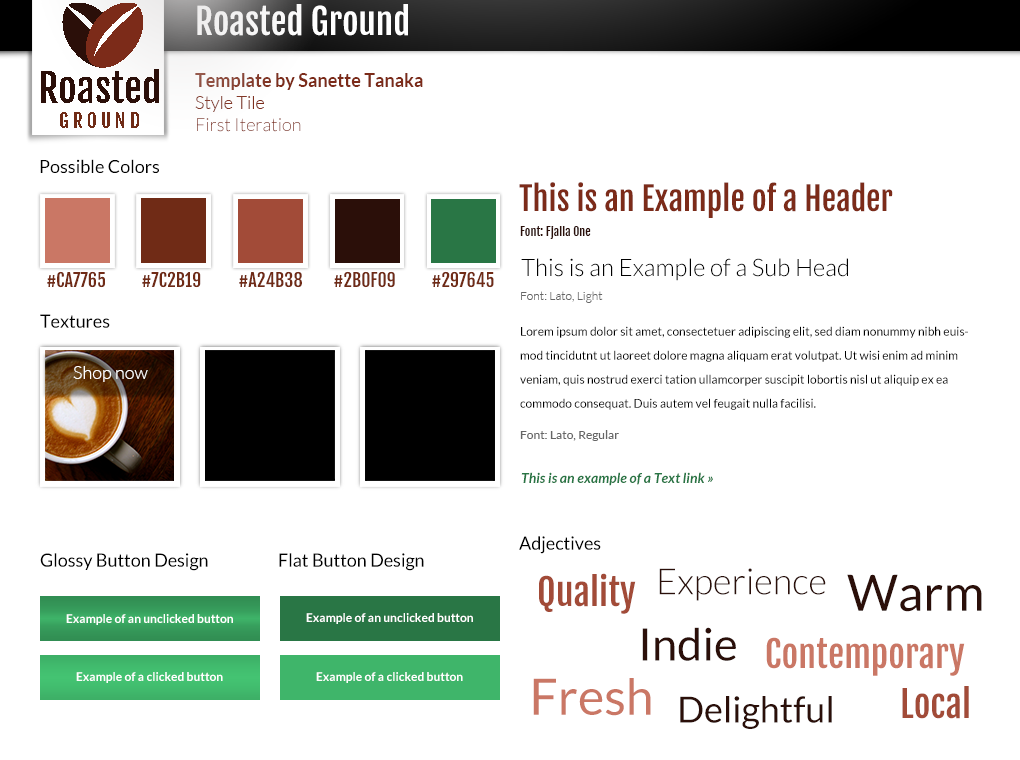
<style>
.page{position:relative;width:1020px;height:760px;background:#ffffff}
.page>*{position:absolute;margin:0}
.t1{font:35px "FjallaOne-Regular";color:#ffffff}
.t2{font:18px "Lato-Bold";color:#7c2b19}
.t3{font:18px "Lato-Light";color:#7c2b19}
.t4{font:18px "Lato-Light"}
.t5{font:18px "Lato-Regular";color:#000000}
.t6{font:32px "FjallaOne-Regular";color:#7c2b19}
.t7{font:12px "FjallaOne-Regular";color:#2b0f09}
.t8{font:24px "Lato-Light";color:#000000}
.t9{font:18px "FjallaOne-Regular";color:#702b16}
.t10{font:12px "Lato-Light";color:#666666}
.t11{font:18.3px "Lato-Regular";color:#000000}
.t12{font:12px/24px "Lato-Regular";color:#000000}
.t13{font:18px "Lato-Light";color:#ffffff}
.t14{font:12px "Lato-Regular";color:#666666}
.t15{font:14px "Lato-BoldItalic";color:#297645}
.t16{font:36px "Lato-Light";color:#2b0f09}
.t17{font:36px "FjallaOne-Regular";color:#a24b38}
.t18{font:50px "Lato-Regular";color:#2b0f09}
.t19{font:12px "Lato-Bold";color:#ffffff}
.t20{font:45px "Lato-Regular";color:#2b0f09}
.t21{font:36px "FjallaOne-Regular";color:#ca7765}
.t22{font:50px "Lato-Regular";color:#ca7765}
.t23{font:36px "Lato-Regular";color:#2b0f09}
</style>
<div class="page">
<p class="t1" style="left:197px;top:4px;width:211px;height:32px">Roasted Ground</p>
<p class="t2" style="left:195px;top:73px;width:228px;height:17px">Template by Sanette Tanaka</p>
<p class="t3" style="left:195px;top:96px;width:69px;height:16px">Style Tile</p>
<p class="t4" style="left:197px;top:118px;width:104px;height:14px">First Iteration</p>
<p class="t5" style="left:40px;top:159px;width:119px;height:14px">Possible Colors</p>
<p class="t6" style="left:519px;top:182px;width:374px;height:36px">This is an Example of a Header</p>
<p class="t7" style="left:520px;top:226px;width:71px;height:13px">Font: Fjalla One</p>
<p class="t8" style="left:521px;top:258px;width:327px;height:23px">This is an Example of a Sub Head</p>
<p class="t9" style="left:47px;top:271px;width:58px;height:17px">#CA7765</p>
<p class="t9" style="left:142px;top:271px;width:59px;height:17px">#7C2B19</p>
<p class="t9" style="left:239px;top:271px;width:63px;height:17px">#A24B38</p>
<p class="t9" style="left:334px;top:271px;width:61px;height:17px">#2B0F09</p>
<p class="t9" style="left:432px;top:271px;width:62px;height:17px">#297645</p>
<p class="t10" style="left:521px;top:291px;width:82px;height:12px">Font: Lato, Light</p>
<p class="t11" style="left:40px;top:314px;width:70px;height:14px">Textures</p>
<p class="t12" style="left:520px;top:326px;width:448px;height:84px">Lorem ipsum dolor sit amet, consectetuer adipiscing elit, sed diam nonummy nibh euismod tincidutnt ut laoreet dolore magna aliquam erat volutpat. Ut wisi enim ad minim veniam, quis nostrud exerci tation ullamcorper suscipit lobortis nisl ut aliquip ex ea commodo consequat. Duis autem vel feugait nulla facilisi.</p>
<p class="t13" style="left:73px;top:366px;width:75px;height:16px">Shop now</p>
<p class="t14" style="left:520px;top:430px;width:99px;height:11px">Font: Lato, Regular</p>
<p class="t15" style="left:521px;top:472px;width:192px;height:14px">This is an example of a Text link »</p>
<p class="t11" style="left:519px;top:536px;width:82px;height:18px">Adjectives</p>
<p class="t11" style="left:40px;top:553px;width:168px;height:18px">Glossy Button Design</p>
<p class="t11" style="left:279px;top:553px;width:145px;height:18px">Flat Button Design</p>
<p class="t16" style="left:659px;top:568px;width:167px;height:33px">Experience</p>
<p class="t17" style="left:539px;top:573px;width:97px;height:41px">Quality</p>
<p class="t18" style="left:847px;top:574px;width:135px;height:38px">Warm</p>
<p class="t19" style="left:66px;top:614px;width:167px;height:11px">Example of an unclicked button</p>
<p class="t19" style="left:306px;top:613px;width:167px;height:11px">Example of an unclicked button</p>
<p class="t20" style="left:642px;top:627px;width:94px;height:34px">Indie</p>
<p class="t21" style="left:766px;top:637px;width:199px;height:39px">Contemporary</p>
<p class="t19" style="left:76px;top:672px;width:147px;height:11px">Example of a clicked button</p>
<p class="t19" style="left:316px;top:672px;width:147px;height:11px">Example of a clicked button</p>
<p class="t22" style="left:533px;top:678px;width:118px;height:38px">Fresh</p>
<p class="t17" style="left:902px;top:686px;width:67px;height:33px">Local</p>
<p class="t23" style="left:680px;top:696px;width:152px;height:33px">Delightful</p>
</div>
